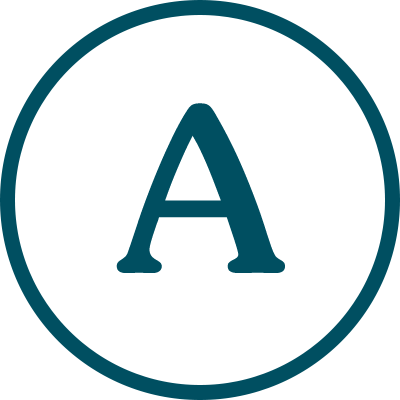
<style>
.page{position:relative;width:400px;height:400px;background:#ffffff}
.page>*{position:absolute;margin:0}
.t1{font:250px "SouvenirEF-Medium";color:#004f61}
</style>
<div class="page">
<p class="t1" style="left:116px;top:103px;width:169px;height:170px">A</p>
</div>
